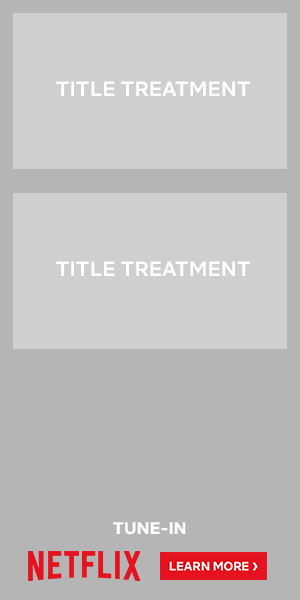
<style>
.page{position:relative;width:300px;height:600px;background:#b5b5b5}
.page>*{position:absolute;margin:0}
.t1{font:20.8px "NetflixSans-Medium";color:#ffffff}
.t2{font:17px "NetflixSans-Bold";letter-spacing:-0.005em;color:#ffffff}
</style>
<div class="page">
<p class="t1" style="left:56px;top:81px;width:194px;height:15px">TITLE TREATMENT</p>
<p class="t1" style="left:56px;top:261px;width:194px;height:15px">TITLE TREATMENT</p>
<p class="t2" style="left:113px;top:522px;width:73px;height:13px">TUNE-IN</p>
</div>
